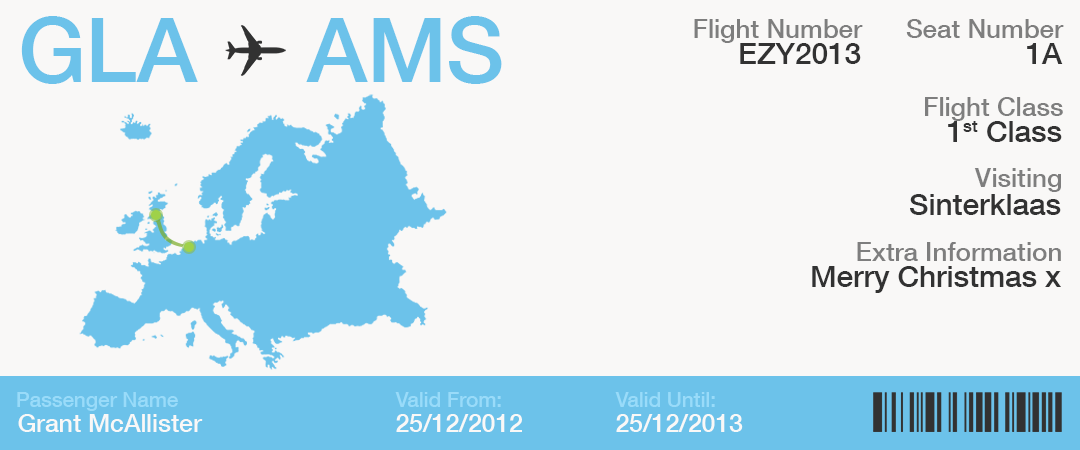
<style>
.page{position:relative;width:1080px;height:450px;background:#f9f8f7}
.page>*{position:absolute;margin:0}
.t1{font:90px "HelveticaNeue-Medium";letter-spacing:-0.005em;color:#6cc2ea}
.t2{font:26.2px "HelveticaNeue-Medium";letter-spacing:-0.005em;color:#7e7e7e}
.t3{font:30px "HelveticaNeue-Medium";letter-spacing:-0.005em;color:#323232}
.t4{font:20.8px "HelveticaNeue-Medium";letter-spacing:-0.005em;color:#99dbf9}
.t5{font:25px "HelveticaNeue-Medium";letter-spacing:-0.005em;color:#f9f8f7}
</style>
<div class="page">
<p class="t1" style="left:21px;top:16px;width:177px;height:68px">GLA</p>
<p class="t1" style="left:306px;top:16px;width:196px;height:68px">AMS</p>
<p class="t2" style="left:694px;top:19px;width:169px;height:24px">Flight Number</p>
<p class="t2" style="left:906px;top:19px;width:158px;height:19px">Seat Number</p>
<p class="t3" style="left:740px;top:43px;width:121px;height:21px">EZY2013</p>
<p class="t3" style="left:1027px;top:43px;width:36px;height:21px">1A</p>
<p class="t2" style="left:925px;top:97px;width:138px;height:24px">Flight Class</p>
<p class="t3" style="left:948px;top:121px;width:114px;height:21px">1st Class</p>
<p class="t2" style="left:974px;top:168px;width:87px;height:24px">Visiting</p>
<p class="t3" style="left:910px;top:194px;width:151px;height:21px">Sinterklaas</p>
<p class="t2" style="left:857px;top:242px;width:204px;height:19px">Extra Information</p>
<p class="t3" style="left:812px;top:266px;width:249px;height:27px">Merry Christmas x</p>
<p class="t4" style="left:17px;top:392px;width:161px;height:19px">Passenger Name</p>
<p class="t4" style="left:395px;top:392px;width:106px;height:15px">Valid From:</p>
<p class="t4" style="left:615px;top:392px;width:100px;height:15px">Valid Until:</p>
<p class="t5" style="left:18px;top:414px;width:185px;height:18px">Grant McAllister</p>
<p class="t5" style="left:396px;top:414px;width:126px;height:18px">25/12/2012</p>
<p class="t5" style="left:616px;top:414px;width:127px;height:18px">25/12/2013</p>
</div>
